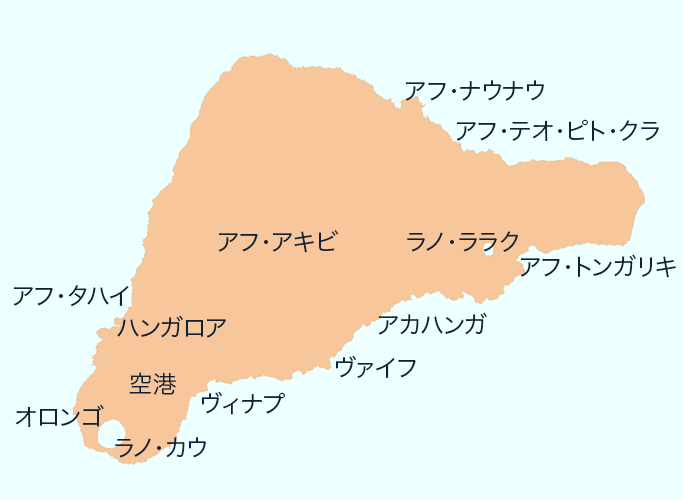
<style>
.page{position:relative;width:683px;height:500px;background:#eeffff}
.page>*{position:absolute;margin:0}
.t1{font:24px "HiraKakuProN-W3";color:#0e2135}
</style>
<div class="page">
<p class="t1" style="left:405px;top:80px;width:139px;height:21px">アフ・ナウナウ</p>
<p class="t1" style="left:456px;top:119px;width:203px;height:22px">アフ・テオ・ピト・クラ</p>
<p class="t1" style="left:218px;top:230px;width:121px;height:23px">アフ・アキビ</p>
<p class="t1" style="left:407px;top:231px;width:112px;height:21px">ラノ・ララク</p>
<p class="t1" style="left:520px;top:254px;width:156px;height:24px">ｱフ・トンガリキ</p>
<p class="t1" style="left:13px;top:285px;width:116px;height:22px">アフ・タハイ</p>
<p class="t1" style="left:117px;top:315px;width:109px;height:23px">ハンガロア</p>
<p class="t1" style="left:378px;top:312px;width:109px;height:23px">アカハンガ</p>
<p class="t1" style="left:335px;top:355px;width:81px;height:23px">ヴァイフ</p>
<p class="t1" style="left:129px;top:372px;width:47px;height:23px">空港</p>
<p class="t1" style="left:201px;top:391px;width:84px;height:24px">ヴィナプ</p>
<p class="t1" style="left:15px;top:404px;width:89px;height:23px">オロンゴ</p>
<p class="t1" style="left:115px;top:437px;width:91px;height:21px">ラノ・カウ</p>
</div>
